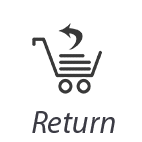
<style>
.page{position:relative;width:142px;height:142px;background:#ffffff}
.page>*{position:absolute;margin:0}
.t1{font:32px "MyriadPro-It";color:#3b3b44}
</style>
<div class="page">
<p class="t1" style="left:32px;top:111px;width:83px;height:22px">Return</p>
</div>
